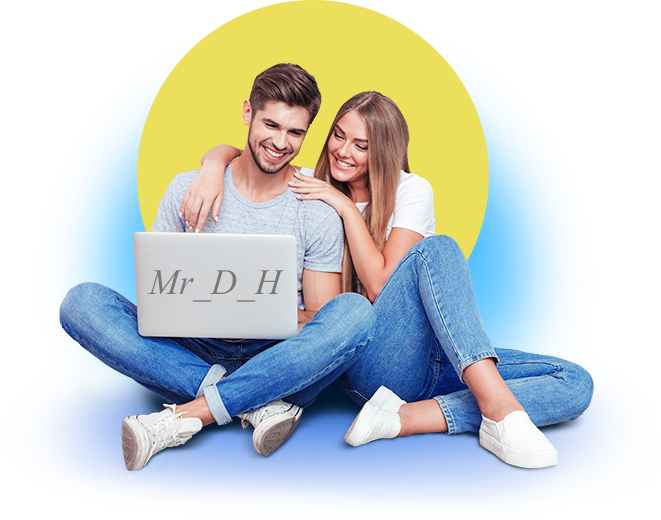
<style>
.page{position:relative;width:661px;height:520px;background:#ffffff}
.page>*{position:absolute;margin:0}
.t1{font:36px "TimesNewRomanPS-ItalicMT";color:#7a7676}
</style>
<div class="page">
<p class="t1" style="left:147px;top:270px;width:138px;height:32px">Mr_D_H</p>
</div>
